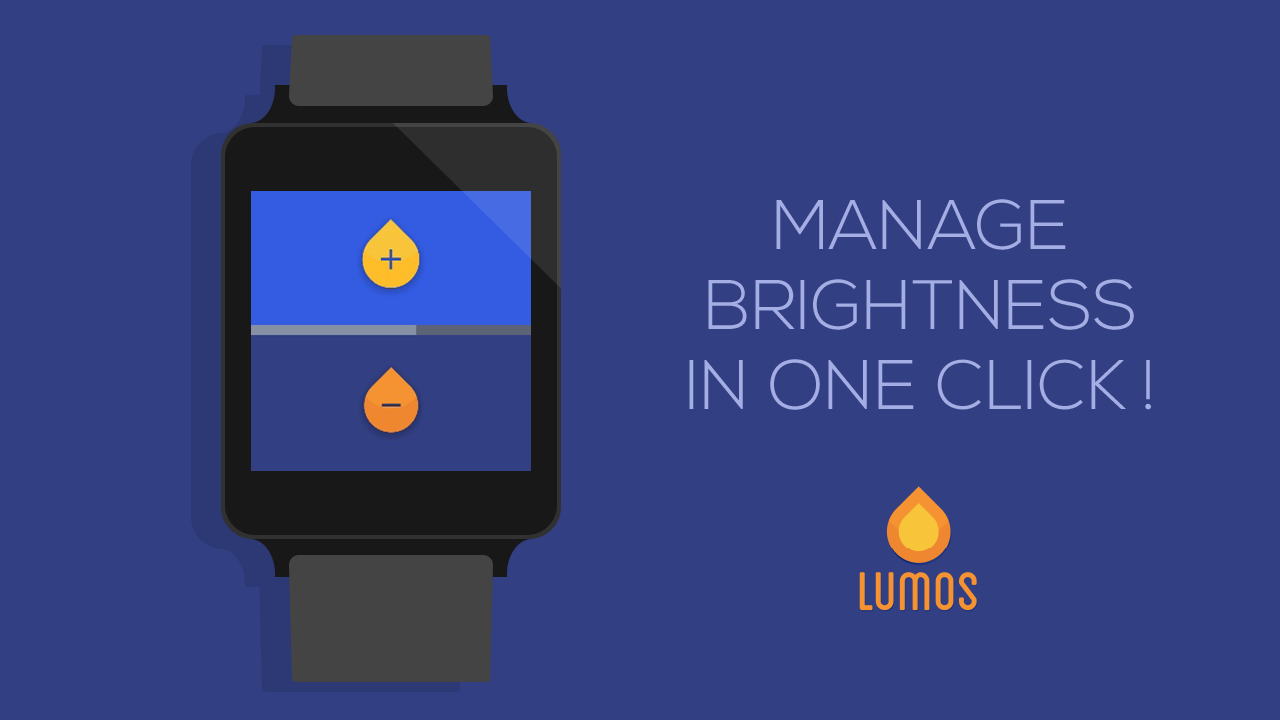
<style>
.page{position:relative;width:1280px;height:720px;background:#323f82}
.page>*{position:absolute;margin:0}
.t1{font:70px/80px "NexaLight";color:#b8c2f5;font-variant:small-caps}
</style>
<div class="page">
<p class="t1" style="left:689px;top:199px;width:462px;height:211px;text-align:center;opacity:0.85">MANAGE <br>BRIGHTNESS<br>IN ONE CLICK !</p>
</div>
